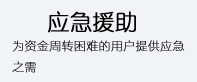
<style>
.page{position:relative;width:197px;height:82px;background:#f0f4f7}
.page>*{position:absolute;margin:0}
.t1{font:22px "YouYuan";color:#000000;font-weight:bold}
.t2{font:12px "FZLTCXHJW--GB1-0";color:#000000;font-weight:bold}
</style>
<div class="page">
<p class="t1" style="left:48px;top:11px;width:88px;height:22px">应急援助</p>
<p class="t2" style="left:12px;top:40px;width:173px;height:33px">为资金周转困难的用户提供应急<br>之需</p>
</div>
